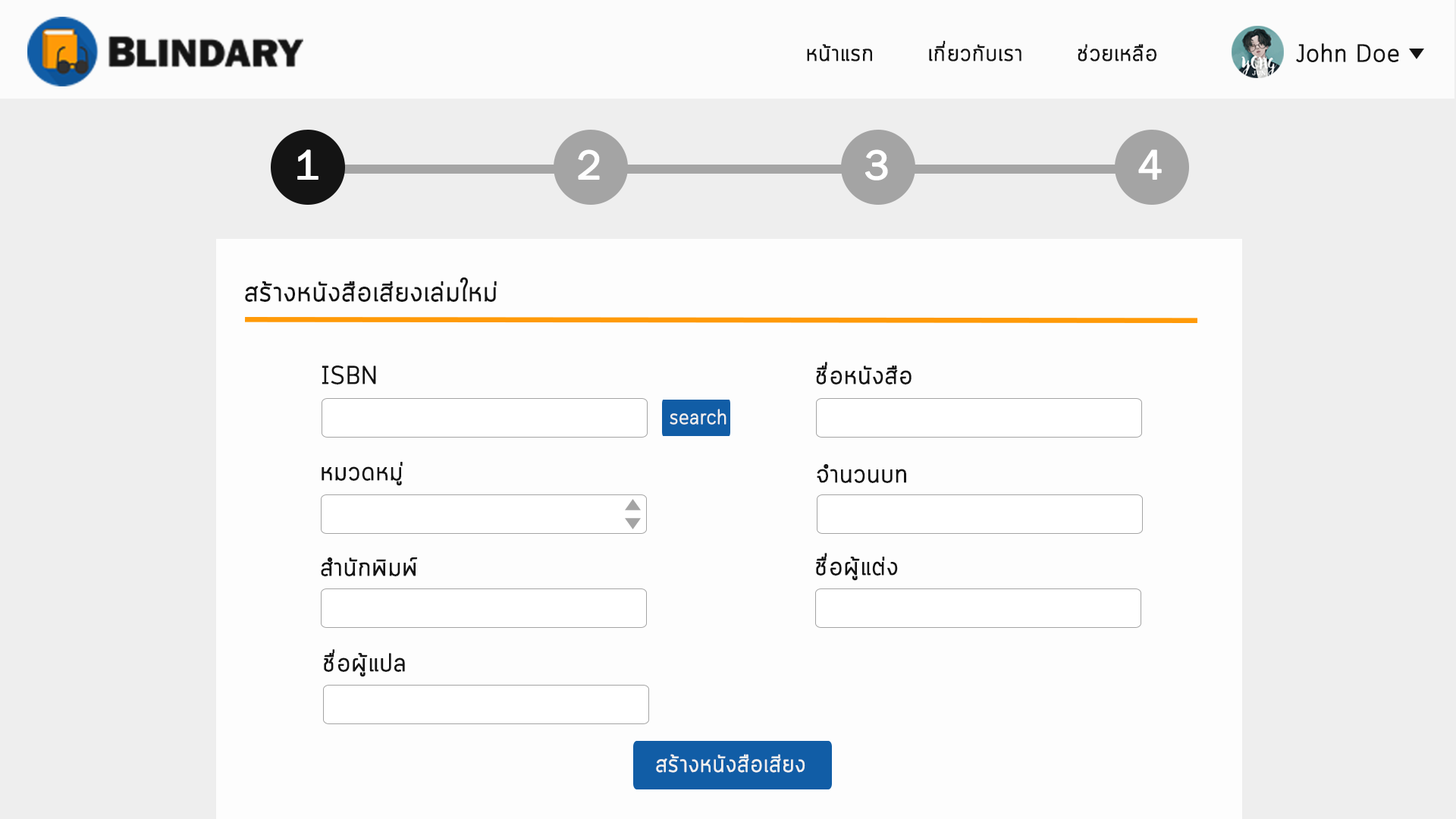
<style>
.page{position:relative;width:1456px;height:819px;background:#fdfdfd}
.page>*{position:absolute;margin:0}
.t1{font:22.7px "Cloud-Light";color:#141414;font-weight:bold}
.t2{font:24.2px "Cloud-Light";color:#141414;font-weight:bold}
.t3{font:42.1px "FranklinGothic-Book";color:#ffffff;font-weight:bold}
.t4{font:42.1px "FranklinGothic-Book";color:#fefefe;font-weight:bold}
.t5{font:27.3px "Cloud-Light";color:#141414;font-weight:bold}
.t6{font:25px "Cloud-Light";color:#141414;font-weight:bold}
.t7{font:19.6px "Cloud-Light";color:#efefef;font-weight:bold}
.t8{font:23.7px "Cloud-Light";color:#efefef;font-weight:bold}
</style>
<div class="page">
<p class="t1" style="left:807px;top:40px;width:349px;height:21px">หน้าแรก       เกี่ยวกับเรา       ช่วยเหลือ</p>
<p class="t2" style="left:1296px;top:43px;width:103px;height:19px">John Doe</p>
<p class="t3" style="left:297px;top:149px;width:21px;height:31px">1</p>
<p class="t4" style="left:578px;top:149px;width:22px;height:31px">2</p>
<p class="t3" style="left:865px;top:149px;width:23px;height:31px">3</p>
<p class="t3" style="left:1138px;top:149px;width:24px;height:31px">4</p>
<p class="t5" style="left:245px;top:277px;width:252px;height:25px">สร้างหนังสือเสียงเล่มใหม่</p>
<p class="t6" style="left:322px;top:366px;width:54px;height:18px">ISBN</p>
<p class="t6" style="left:816px;top:362px;width:96px;height:22px">ชื่อหนังสือ</p>
<p class="t7" style="left:670px;top:409px;width:56px;height:16px">search</p>
<p class="t6" style="left:322px;top:462px;width:81px;height:24px">หมวดหมู่</p>
<p class="t6" style="left:817px;top:464px;width:89px;height:19px">จำนวนบท</p>
<p class="t6" style="left:321px;top:557px;width:97px;height:19px">สำนักพิมพ์</p>
<p class="t6" style="left:816px;top:553px;width:82px;height:28px">ชื่อผู้แต่ง</p>
<p class="t6" style="left:324px;top:649px;width:81px;height:28px">ชื่อผู้แปล</p>
<p class="t8" style="left:656px;top:754px;width:149px;height:19px">สร้างหนังสือเสียง</p>
</div>
